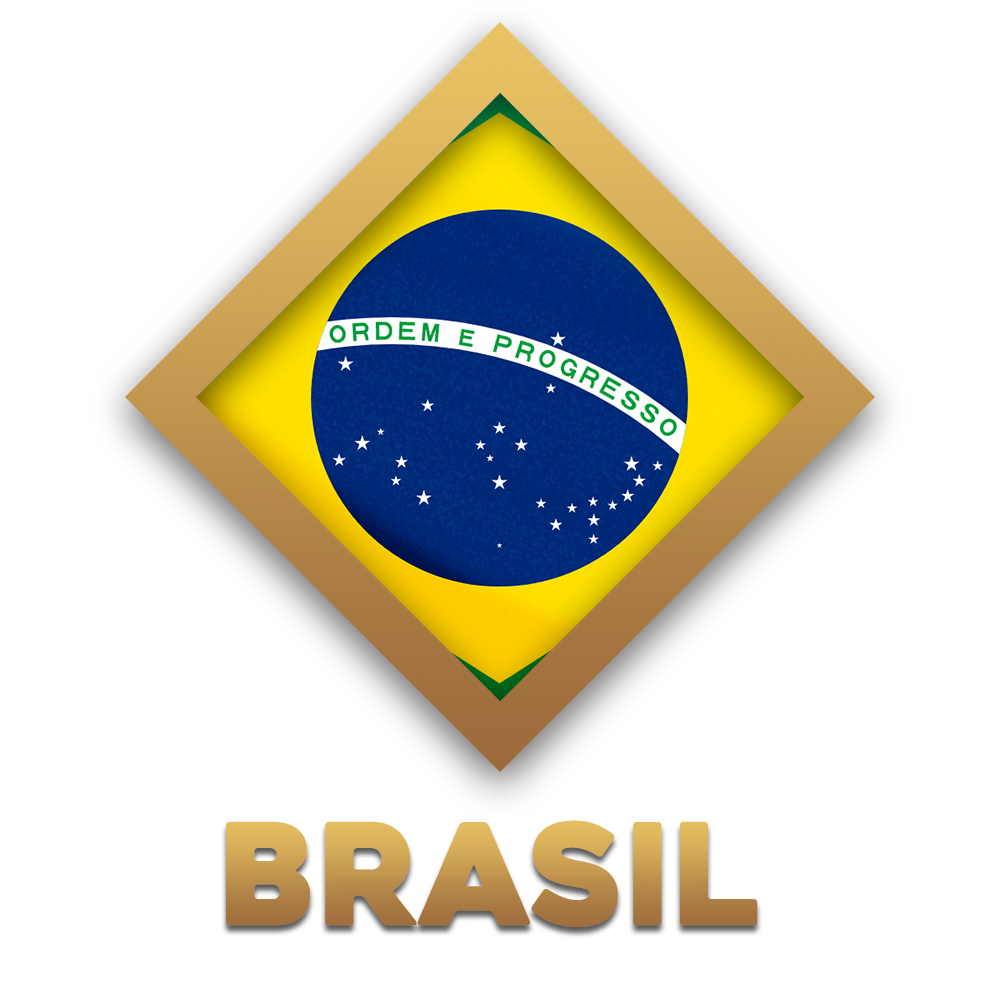
<style>
.page{position:relative;width:1000px;height:1000px;background:#ffffff}
.page>*{position:absolute;margin:0}
.t1{font:141px "Heavitas"}
</style>
<div class="page">
<p class="t1" style="left:226px;top:820px;width:532px;height:107px">Brasil</p>
</div>
